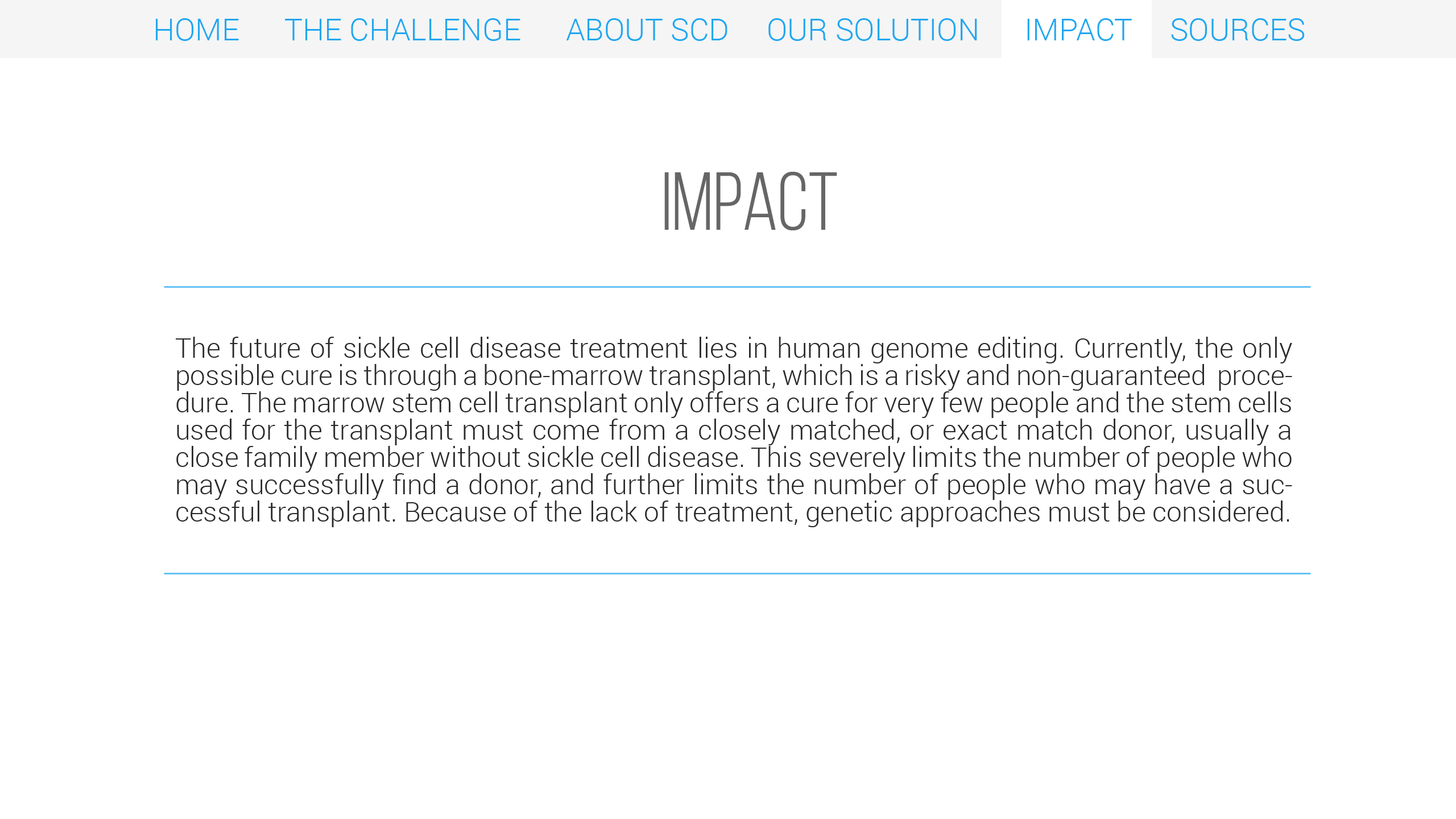
<style>
.page{position:relative;width:1456px;height:819px;background:#ffffff}
.page>*{position:absolute;margin:0}
.t1{font:30.7px "Roboto-Light";color:#22a7f0}
.t2{font:81.9px "BebasNeueBook";color:#666666}
.t3{font:27.3px/27.3px "Roboto-Light";color:#2a2a2a}
</style>
<div class="page">
<p class="t1" style="left:156px;top:18px;width:1149px;height:23px">HOME      THE CHALLENGE      ABOUT SCD     OUR SOLUTION      IMPACT     SOURCES</p>
<p class="t2" style="left:664px;top:172px;width:173px;height:58px">IMPACT</p>
<p class="t3" style="left:176px;top:337px;width:1116px;height:190px;text-align:justify">The future of sickle cell disease treatment lies in human genome editing. Currently, the only possible cure is through a bone-marrow transplant, which is a risky and non-guaranteed  procedure. The marrow stem cell transplant only offers a cure for very few people and the stem cells used for the transplant must come from a closely matched, or exact match donor, usually a close family member without sickle cell disease. This severely limits the number of people who may successfully find a donor, and further limits the number of people who may have a successful transplant. Because of the lack of treatment, genetic approaches must be considered.</p>
</div>
